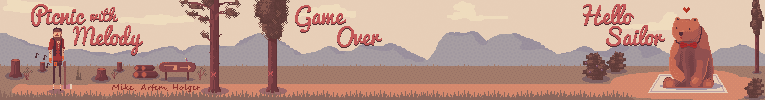
<style>
.page{position:relative;width:765px;height:100px;background:#e7ceb7}
.page>*{position:absolute;margin:0}
.t1{font:22px "Pacifico";color:#c35858}
.t2{font:22px "Pacifico";color:#d95763}
.t3{font:15px "Pacifico";color:#c35858}
.t4{font:15px "Pacifico";color:#d95763}
.t5{font:8px "SegoeScript";color:#883524}
</style>
<div class="page">
<p class="t1" style="left:31px;top:5px;width:55px;height:22px">Picnic</p>
<p class="t2" style="left:31px;top:4px;width:55px;height:22px">Picnic</p>
<p class="t1" style="left:295px;top:6px;width:51px;height:27px">Game</p>
<p class="t2" style="left:295px;top:5px;width:51px;height:27px">Game</p>
<p class="t1" style="left:583px;top:5px;width:51px;height:21px">Hello</p>
<p class="t2" style="left:583px;top:4px;width:51px;height:21px">Hello</p>
<p class="t3" style="left:90px;top:8px;width:28px;height:14px">with</p>
<p class="t4" style="left:90px;top:7px;width:28px;height:14px">with</p>
<p class="t1" style="left:73px;top:26px;width:70px;height:30px">Melody</p>
<p class="t2" style="left:73px;top:25px;width:70px;height:30px">Melody</p>
<p class="t1" style="left:337px;top:27px;width:45px;height:21px">Over</p>
<p class="t2" style="left:337px;top:26px;width:45px;height:21px">Over</p>
<p class="t1" style="left:606px;top:26px;width:59px;height:21px">Sailor</p>
<p class="t2" style="left:606px;top:25px;width:59px;height:21px">Sailor</p>
<p class="t5" style="left:112px;top:84px;width:88px;height:8px">Mike, Artem, Holger</p>
</div>
